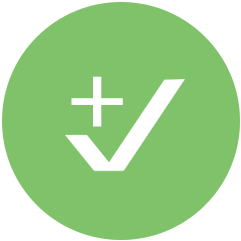
<style>
.page{position:relative;width:241px;height:241px;background:#80c269}
.page>*{position:absolute;margin:0}
.t1{font:80px "Meiryo";color:#ffffff;font-weight:bold}
</style>
<div class="page">
<p class="t1" style="left:71px;top:76px;width:52px;height:51px">＋</p>
</div>
